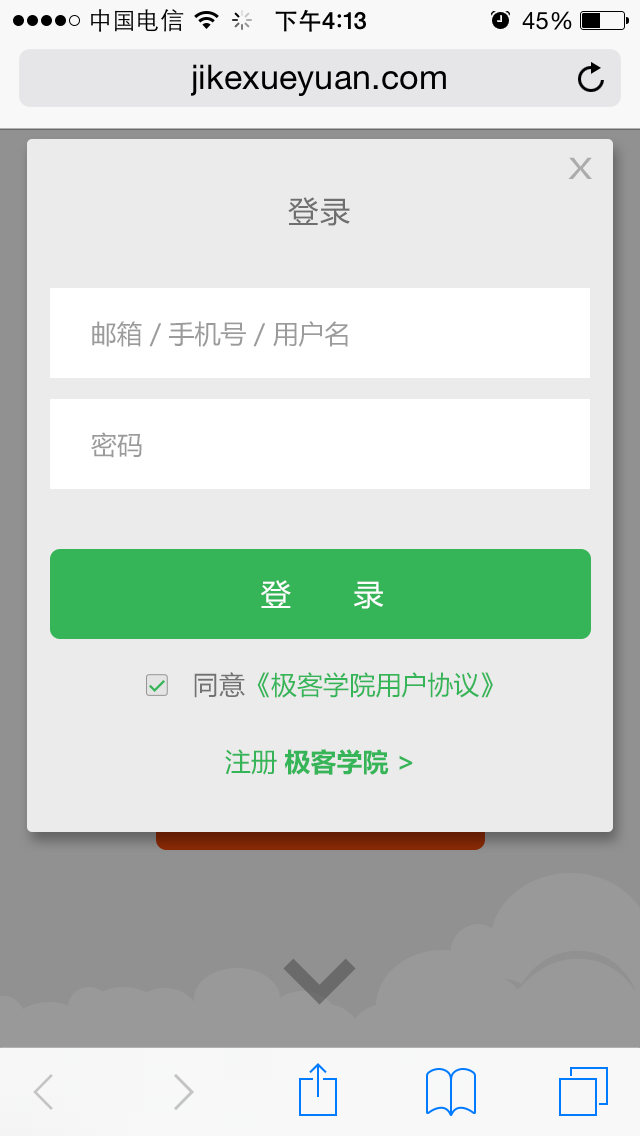
<style>
.page{position:relative;width:640px;height:1136px;background:#ebebeb}
.page>*{position:absolute;margin:0}
.t1{font:28.4px "MicrosoftYaHei";letter-spacing:0.051em;color:#acacac;scale:1.34 1}
.t2{font:30px "MicrosoftYaHei";letter-spacing:0.051em;color:#6f6f6f}
.t3{font:26px "MicrosoftYaHei";color:#9c9b9b}
.t4{font:30px "MicrosoftYaHei";color:#ffffff}
.t5{font:26px "MicrosoftYaHei";color:#35b558}
.t6{font:26px "MicrosoftYaHei";color:#727272}
.t7{font:26px "MicrosoftYaHei-Bold";color:#35b558}
</style>
<div class="page">
<p class="t1" style="left:568px;top:157px;width:24px;height:22px">X</p>
<p class="t2" style="left:288px;top:197px;width:62px;height:29px">登录</p>
<p class="t3" style="left:92px;top:321px;width:256px;height:26px">邮箱／手机号／用户名</p>
<p class="t3" style="left:91px;top:432px;width:51px;height:26px">密码</p>
<p class="t4" style="left:261px;top:580px;width:123px;height:29px">登       录</p>
<p class="t5" style="left:194px;top:672px;width:299px;height:26px"><span class="t6">同意</span>《极客学院用户协议》</p>
<p class="t7" style="left:225px;top:749px;width:188px;height:26px"><span class="t5">注册 </span>极客学院 &gt;</p>
</div>
